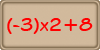
<style>
.page{position:relative;width:100px;height:50px;background:#d1b99c}
.page>*{position:absolute;margin:0}
.t1{font:20px "StylusITCTTBold";color:#ff0000}
</style>
<div class="page">
<p class="t1" style="left:7px;top:18px;width:86px;height:16px">(-3)x2+8</p>
</div>
